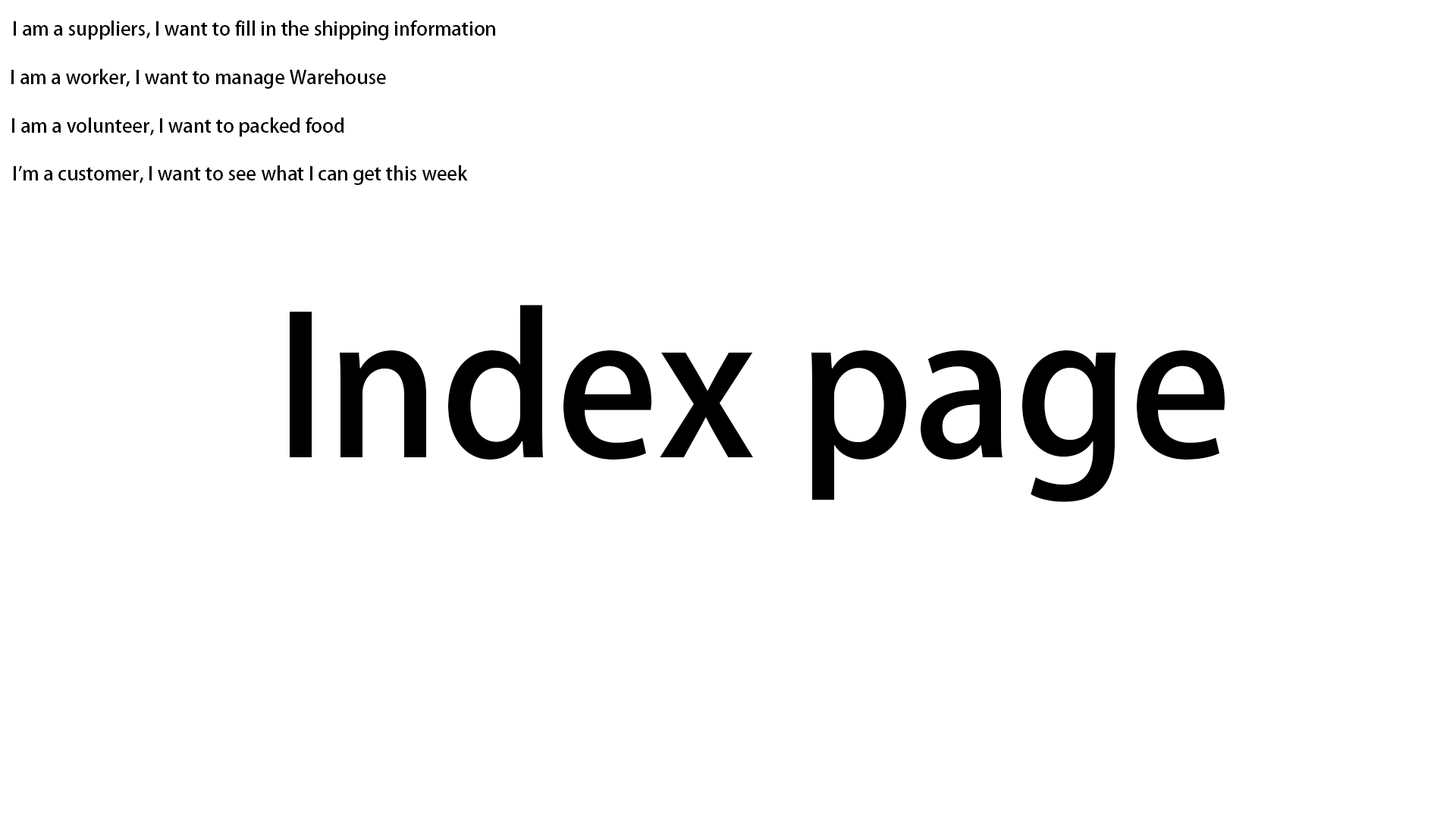
<style>
.page{position:relative;width:1456px;height:819px;background:#ffffff}
.page>*{position:absolute;margin:0}
.t1{font:19px "AdobeHeitiStd-Regular";color:#000000}
.t2{font:189.6px "AdobeHeitiStd-Regular";color:#000000}
</style>
<div class="page">
<p class="t1" style="left:14px;top:20px;width:481px;height:20px">I am a suppliers, I want to fill in the shipping information</p>
<p class="t1" style="left:11px;top:68px;width:375px;height:21px">I am a worker, I want to manage Warehouse</p>
<p class="t1" style="left:12px;top:117px;width:332px;height:20px">I am a volunteer, I want to packed food</p>
<p class="t1" style="left:14px;top:165px;width:454px;height:20px">I'm a customer, I want to see what I can get this week</p>
<p class="t2" style="left:290px;top:305px;width:935px;height:197px">Index page</p>
</div>
